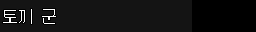
<style>
.page{position:relative;width:256px;height:32px;background:#141414}
.page>*{position:absolute;margin:0}
.t1{font:19px "ThinDungGeunMo";color:#ffffff;scale:0.9 1}
</style>
<div class="page">
<p class="t1" style="left:3px;top:9px;width:53px;height:15px">토끼 군</p>
</div>
